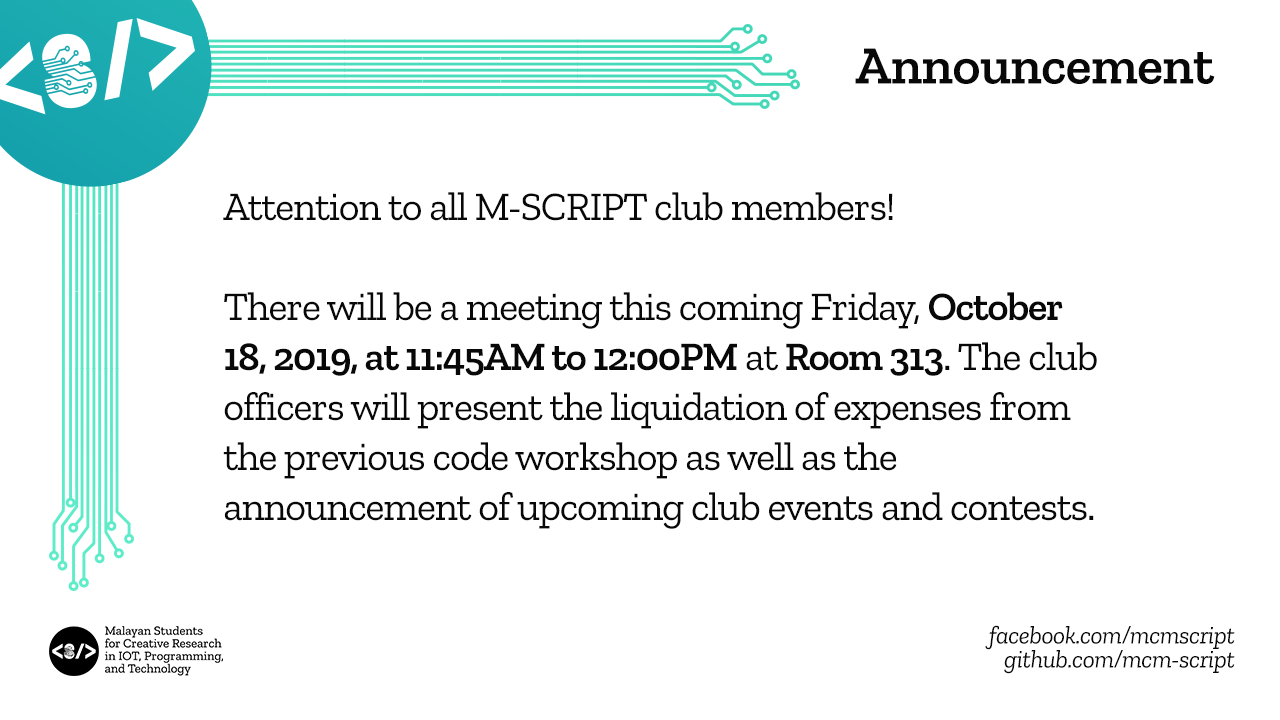
<style>
.page{position:relative;width:1280px;height:720px;background:#ffffff}
.page>*{position:absolute;margin:0}
.t1{font:53.7px "ZillaSlab-SemiBold";letter-spacing:-0.01em;color:#080808}
.t2{font:40.3px/50px "ZillaSlab-Regular";letter-spacing:-0.03em;color:#080808}
.t3{font:40.3px/50px "ZillaSlab-SemiBold";letter-spacing:-0.03em;color:#080808}
.t4{font:25.2px/24px "ZillaSlab-Italic";letter-spacing:-0.02em;color:#080808}
</style>
<div class="page">
<p class="t1" style="left:855px;top:48px;width:360px;height:36px">Announcement</p>
<p class="t2" style="left:223px;top:192px;width:874px;height:337px">Attention to all M-SCRIPT club members!<br><br>There will be a meeting this coming Friday, <span class="t3">October 18, 2019, at 11:45AM to 12:00PM</span> at <span class="t3">Room 313</span>. The club officers will present the liquidation of expenses from the previous code workshop as well as the announcement of upcoming club events and contests.</p>
<p class="t4" style="left:985px;top:625px;width:250px;height:49px;text-align:right">facebook.com/mcmscript<br>github.com/mcm-script</p>
</div>
